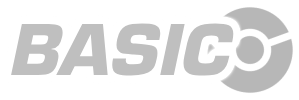
<style>
.page{position:relative;width:299px;height:100px;background:#ffffff}
.page>*{position:absolute;margin:0}
.t1{font:68px "Eurostile-BoldOblique";color:#bfbfbf}
</style>
<div class="page">
<p class="t1" style="left:11px;top:23px;width:223px;height:53px">BASIC</p>
</div>
